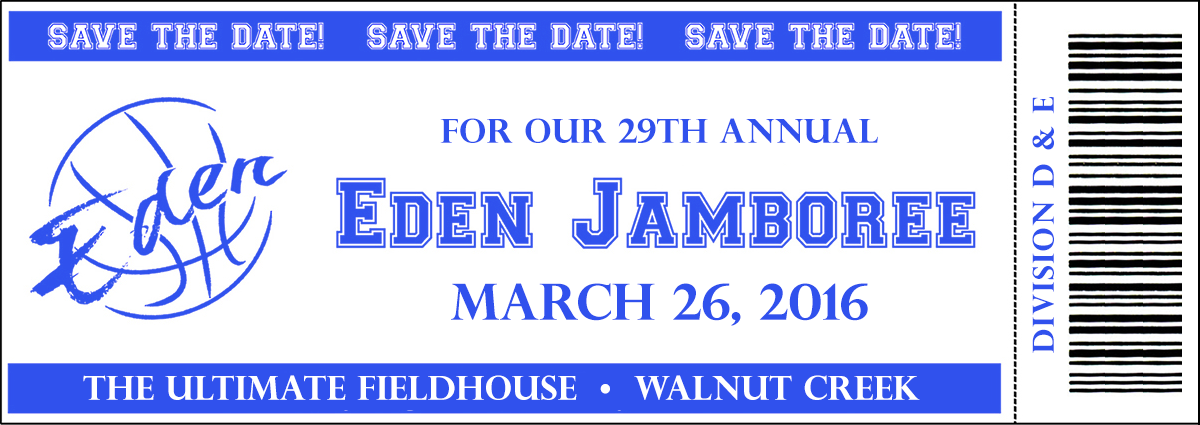
<style>
.page{position:relative;width:1200px;height:425px;background:#ffffff}
.page>*{position:absolute;margin:0}
.t1{font:29.2px "PerpetuaTitlingMT-Bold";letter-spacing:0.05em;color:#3051ed}
.t2{font:33.3px "PerpetuaTitlingMT-Bold";color:#3051ed}
.t3{font:50px "PerpetuaTitlingMT-Bold";color:#3051ed}
.t4{font:33.3px "PerpetuaTitlingMT-Bold";color:#ffffff}
</style>
<div class="page">
<p class="t1" style="left:1032px;top:97px;width:22px;height:256px;rotate:-90deg">DIVISION D &amp; E</p>
<p class="t2" style="left:440px;top:118px;width:438px;height:25px">FOR OUR 29th Annual</p>
<p class="t3" style="left:451px;top:283px;width:417px;height:43px">MARCH 26, 2016</p>
<p class="t4" style="left:83px;top:375px;width:837px;height:25px">THE ULTIMATE FIELDHOUSE  •  WALNUT CREEK</p>
</div>
